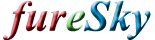
<style>
.page{position:relative;width:155px;height:40px;background:#ffffff}
.page>*{position:absolute;margin:0}
.t1{font:43.6px "TimesNewRomanPS-BoldItalicMT"}
</style>
<div class="page">
<p class="t1" style="left:3px;top:0px;width:148px;height:40px">fureSky</p>
</div>
